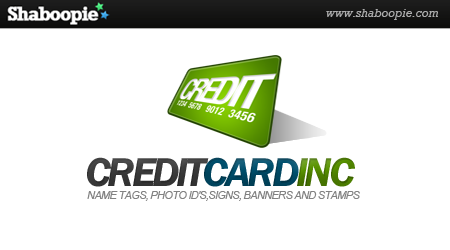
<style>
.page{position:relative;width:450px;height:250px;background:#ffffff}
.page>*{position:absolute;margin:0}
.t1{font:41.7px "FranklinGothic-DemiItalic";letter-spacing:-0.075em;color:#3f3f3f}
.t2{font:41.7px "FranklinGothic-DemiItalic";letter-spacing:-0.075em;color:#00506e}
.t3{font:41.7px "FranklinGothic-DemiItalic";letter-spacing:-0.075em;color:#599300}
.t4{font:11.2px "Arial-ItalicMT";letter-spacing:-0.075em;color:#828282}
</style>
<div class="page">
<p class="t1" style="left:87px;top:157px;width:268px;height:30px">CREDIT<span class="t2">CARD</span><span class="t3">INC</span></p>
<p class="t4" style="left:87px;top:191px;width:273px;height:10px">NAME TAGS, PHOTO ID'S,SIGNS, BANNERS AND STAMPS</p>
</div>
